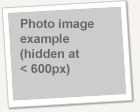
<style>
.page{position:relative;width:140px;height:112px;background:#cccccc}
.page>*{position:absolute;margin:0}
.t1{font:12.4px/15.2px "Arial-BoldMT";color:#666666}
</style>
<div class="page">
<p class="t1" style="left:20px;top:19px;width:74px;height:57px">Photo image<br>example<br>(hidden at<br>&lt; 600px)</p>
</div>
